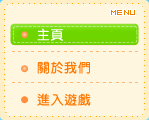
<style>
.page{position:relative;width:149px;height:120px;background:#fff6df}
.page>*{position:absolute;margin:0}
.t1{font:8px "04b08";letter-spacing:0.05em;color:#ef8100}
.t2{font:13px "DFYuan-Md-HK-BF";letter-spacing:0.05em;color:#ffffff}
.t3{font:6px "DFYuan-Md-HK-BF";letter-spacing:0.05em;color:#ffb777}
.t4{font:13px "DFYuan-Md-HK-BF";letter-spacing:0.05em;color:#ff7800}
</style>
<div class="page">
<p class="t1" style="left:111px;top:10px;width:24px;height:5px">MENU</p>
<p class="t2" style="left:37px;top:28px;width:26px;height:13px">主頁</p>
<p class="t3" style="left:12px;top:51px;width:126px;height:1px">_ _ _ _ _ _ _ _ _ _ _ _ _ _ _ _ _ _ _ _ _ _</p>
<p class="t4" style="left:37px;top:61px;width:53px;height:13px">關於我們</p>
<p class="t3" style="left:12px;top:82px;width:126px;height:1px">_ _ _ _ _ _ _ _ _ _ _ _ _ _ _ _ _ _ _ _ _ _</p>
<p class="t4" style="left:37px;top:93px;width:54px;height:13px">進入遊戲</p>
</div>
